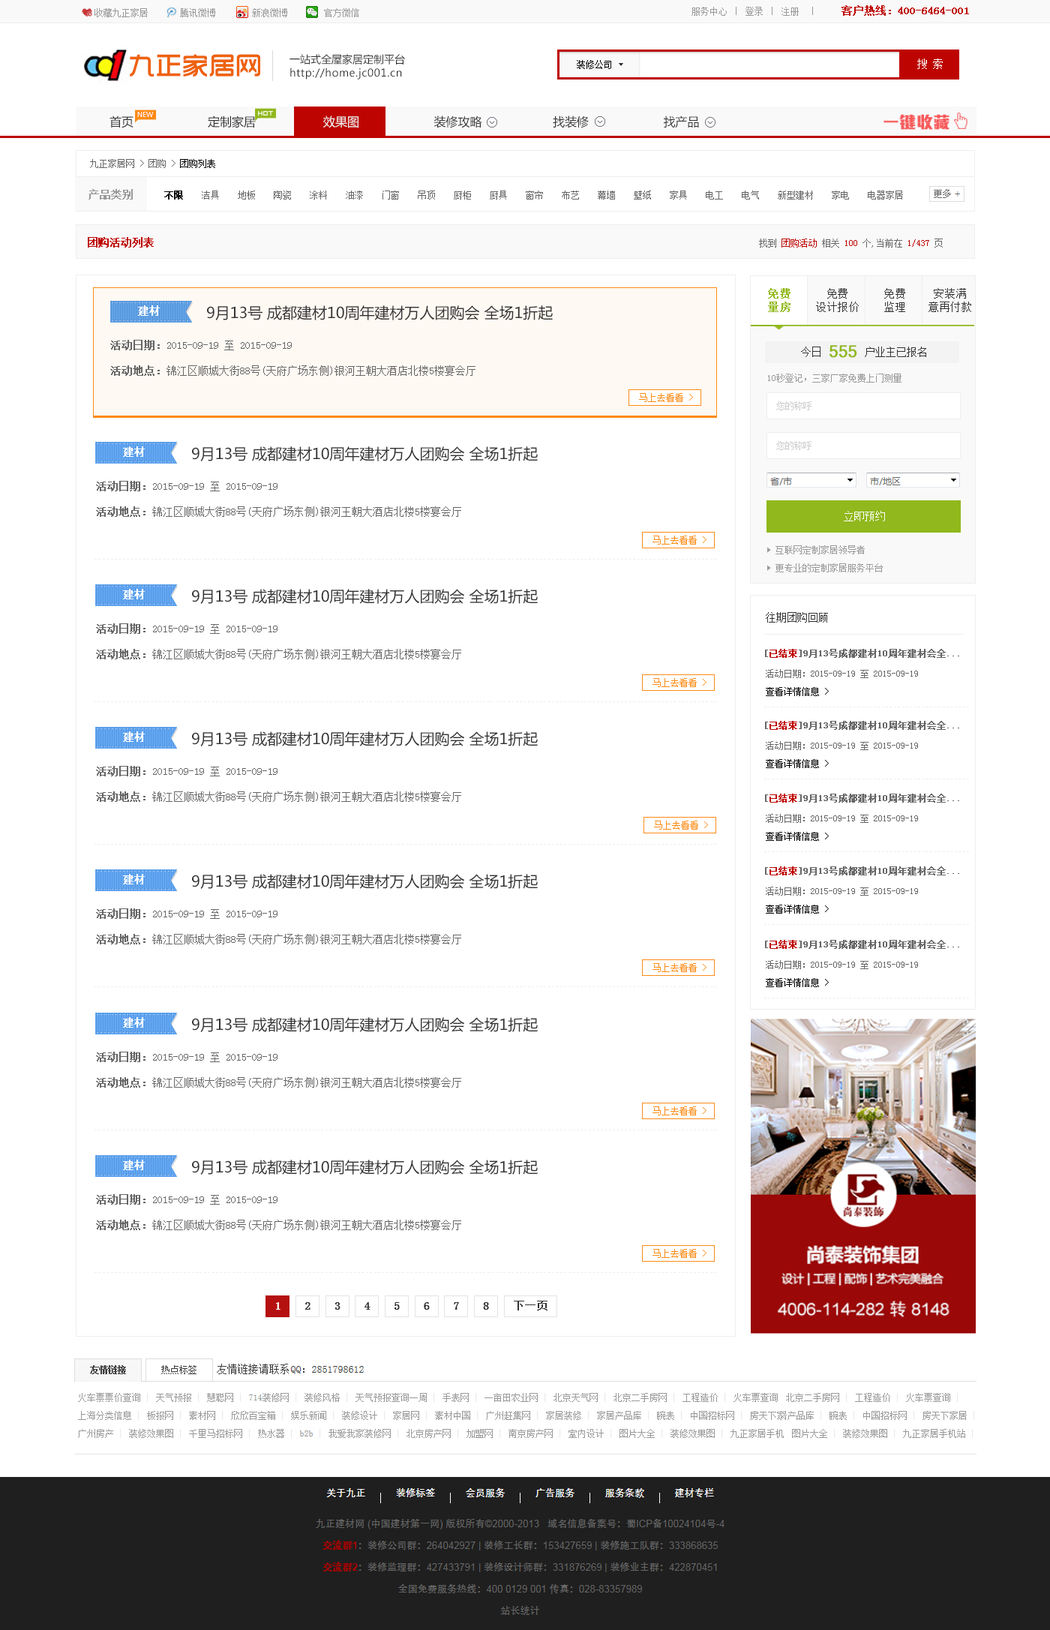
<style>
.page{position:relative;width:1050px;height:1630px;background:#ffffff}
.page>*{position:absolute;margin:0}
.t1{font:9px "NSimSun";color:#999999}
.t2{font:10.5px "NSimSun";color:#bd0400;font-weight:bold}
.t3{font:26px "TRENDS";color:#ee620d;font-weight:bold}
.t4{font:10.5px "MicrosoftYaHei";color:#333333}
.t5{font:9px "NSimSun";color:#000000}
.t6{font:10.5px "MicrosoftYaHei";letter-spacing:0.04em;color:#333333}
.t7{font:6.8px "MicrosoftYaHei";color:#ffffff}
.t8{font:12px "MicrosoftYaHei";color:#333333}
.t9{font:12px "MicrosoftYaHei";color:#efefef}
.t10{font:9px "NSimSun";color:#666666}
.t11{font:10.5px "NSimSun";color:#999999;font-weight:bold}
.t12{font:9px "NSimSun";color:#000000;font-weight:bold}
.t13{font:9px "NSimSun";color:#bd0400}
.t14{font:10.5px/13.5px "NSimSun";letter-spacing:0.05em;color:#91b81d;font-weight:bold}
.t15{font:10.5px/13.5px "NSimSun";letter-spacing:0.05em;color:#333333}
.t16{font:10.5px "NSimSun";color:#ffffff;font-weight:bold}
.t17{font:15px "MicrosoftYaHei";color:#333333}
.t18{font:10.5px/25.5px "NSimSun";color:#666666}
.t19{font:10.5px/25.5px "NSimSun";color:#666666;font-weight:bold}
.t20{font:10.5px "NSimSun";color:#333333}
.t21{font:15.9px "Kartika";color:#91b81d;font-weight:bold}
.t22{font:9px "NSimSun";color:#fd8a13}
.t23{font:9px "NSimSun";color:#cccccc}
.t24{font:10.5px "NSimSun";color:#ffffff}
.t25{font:9px/18px "NSimSun";color:#999999}
.t26{font:4.5px "NSimSun";letter-spacing:0.4em;color:#eeeeee;font-weight:bold}
.t27{font:9px "NSimSun";color:#666666;font-weight:bold}
.t28{font:9px "NSimSun";color:#bd0400;font-weight:bold}
</style>
<div class="page">
<p class="t1" style="left:692px;top:5px;width:277px;height:11px">服务中心 ｜ 登录 ｜ 注册  ｜     <span class="t2">客户热线：400-6464-001</span></p>
<p class="t1" style="left:94px;top:8px;width:265px;height:9px">收藏九正家居       腾讯微博        新浪微博        官方微信</p>
<p class="t3" style="left:130px;top:54px;width:130px;height:23px">九正家居网</p>
<p class="t4" style="left:290px;top:54px;width:115px;height:10px">一站式全屋家居定制平台</p>
<p class="t5" style="left:577px;top:60px;width:34px;height:9px">装修公司</p>
<p class="t6" style="left:290px;top:68px;width:112px;height:12px">http://home.jc001.cn</p>
<p class="t7" style="left:137px;top:112px;width:17px;height:5px">NEW</p>
<p class="t8" style="left:110px;top:116px;width:24px;height:12px">首页</p>
<p class="t8" style="left:208px;top:116px;width:491px;height:12px">定制家居                  <span class="t9"> 效果图</span>                     装修攻略                    找装修                     找产品</p>
<p class="t10" style="left:90px;top:159px;width:125px;height:9px">九正家居网 &gt; 团购 &gt; <span class="t5">团购列表</span></p>
<p class="t11" style="left:88px;top:189px;width:45px;height:11px">产品类别</p>
<p class="t10" style="left:164px;top:190px;width:739px;height:10px"><span class="t12">不限</span>    洁具    地板    陶瓷    涂料    油漆    门窗    吊顶    厨柜    厨具    窗帘    布艺    幕墙    壁纸    家具    电工    电气    新型建材    家电    电器家居</p>
<p class="t2" style="left:88px;top:237px;width:66px;height:11px">团购活动列表</p>
<p class="t10" style="left:759px;top:238px;width:184px;height:10px">找到 <span class="t13">团购活动</span> 相关 <span class="t13">100</span> 个,当前在 <span class="t13">1/437</span> 页</p>
<p class="t14" style="left:768px;top:288px;width:22px;height:24px">免费<br>量房</p>
<p class="t15" style="left:816px;top:288px;width:43px;height:24px;text-align:center">免费<br>设计报价</p>
<p class="t15" style="left:884px;top:288px;width:21px;height:24px">免费<br>监理</p>
<p class="t15" style="left:928px;top:288px;width:43px;height:24px;text-align:center">安装满<br>意再付款</p>
<p class="t16" style="left:138px;top:305px;width:22px;height:11px">建材</p>
<p class="t17" style="left:207px;top:305px;width:346px;height:15px">9月13号 成都建材10周年建材万人团购会 全场1折起</p>
<p class="t18" style="left:110px;top:340px;width:366px;height:36px"><span class="t19">活动日期：</span>2015-09-19 至 2015-09-19<br><span class="t19">活动地点：</span>锦江区顺城大街88号(天府广场东侧)银河王朝大酒店北楼5楼宴会厅</p>
<p class="t20" style="left:801px;top:346px;width:125px;height:11px">今日       户业主已报名</p>
<p class="t21" style="left:830px;top:345px;width:27px;height:13px">555</p>
<p class="t1" style="left:768px;top:374px;width:134px;height:8px">10秒登记，三家厂家免费上门测量</p>
<p class="t22" style="left:639px;top:393px;width:54px;height:9px">马上去看看 &gt;</p>
<p class="t23" style="left:776px;top:401px;width:36px;height:9px">您的称呼</p>
<p class="t16" style="left:123px;top:446px;width:22px;height:11px">建材</p>
<p class="t17" style="left:192px;top:446px;width:346px;height:15px">9月13号 成都建材10周年建材万人团购会 全场1折起</p>
<p class="t23" style="left:776px;top:441px;width:36px;height:9px">您的称呼</p>
<p class="t18" style="left:96px;top:481px;width:365px;height:36px"><span class="t19">活动日期：</span>2015-09-19 至 2015-09-19<br><span class="t19">活动地点：</span>锦江区顺城大街88号(天府广场东侧)银河王朝大酒店北楼5楼宴会厅</p>
<p class="t24" style="left:844px;top:511px;width:41px;height:10px">立即预约</p>
<p class="t22" style="left:652px;top:536px;width:54px;height:8px">马上去看看 &gt;</p>
<p class="t25" style="left:776px;top:545px;width:107px;height:27px">互联网定制家居领导者<br>更专业的定制家居服务平台</p>
<p class="t26" style="left:94px;top:559px;width:622px;height:1px">----------------------------------------------------------------------------------------------------------------------------------------------------------</p>
<p class="t16" style="left:123px;top:589px;width:22px;height:10px">建材</p>
<p class="t17" style="left:192px;top:589px;width:346px;height:15px">9月13号 成都建材10周年建材万人团购会 全场1折起</p>
<p class="t20" style="left:766px;top:612px;width:62px;height:10px">往期团购回顾</p>
<p class="t18" style="left:96px;top:623px;width:365px;height:36px"><span class="t19">活动日期：</span>2015-09-19 至 2015-09-19<br><span class="t19">活动地点：</span>锦江区顺城大街88号(天府广场东侧)银河王朝大酒店北楼5楼宴会厅</p>
<p class="t27" style="left:765px;top:649px;width:194px;height:9px">[<span class="t28">已结束</span>]9月13号成都建材10周年建材会全...</p>
<p class="t22" style="left:652px;top:678px;width:54px;height:9px">马上去看看 &gt;</p>
<p class="t10" style="left:766px;top:669px;width:152px;height:9px">活动日期：2015-09-19 至 2015-09-19</p>
<p class="t5" style="left:766px;top:687px;width:63px;height:9px">查看详情信息 &gt;</p>
<p class="t26" style="left:94px;top:701px;width:622px;height:1px">----------------------------------------------------------------------------------------------------------------------------------------------------------</p>
<p class="t26" style="left:764px;top:706px;width:205px;height:1px">---------------------------------------------------</p>
<p class="t27" style="left:765px;top:721px;width:194px;height:9px">[<span class="t28">已结束</span>]9月13号成都建材10周年建材会全...</p>
<p class="t16" style="left:123px;top:731px;width:22px;height:11px">建材</p>
<p class="t17" style="left:192px;top:731px;width:346px;height:15px">9月13号 成都建材10周年建材万人团购会 全场1折起</p>
<p class="t10" style="left:766px;top:741px;width:152px;height:9px">活动日期：2015-09-19 至 2015-09-19</p>
<p class="t5" style="left:766px;top:759px;width:63px;height:9px">查看详情信息 &gt;</p>
<p class="t18" style="left:96px;top:766px;width:365px;height:36px"><span class="t19">活动日期：</span>2015-09-19 至 2015-09-19<br><span class="t19">活动地点：</span>锦江区顺城大街88号(天府广场东侧)银河王朝大酒店北楼5楼宴会厅</p>
<p class="t26" style="left:764px;top:778px;width:205px;height:1px">---------------------------------------------------</p>
<p class="t27" style="left:765px;top:794px;width:194px;height:8px">[<span class="t28">已结束</span>]9月13号成都建材10周年建材会全...</p>
<p class="t22" style="left:654px;top:820px;width:54px;height:10px">马上去看看 &gt;</p>
<p class="t10" style="left:766px;top:814px;width:152px;height:9px">活动日期：2015-09-19 至 2015-09-19</p>
<p class="t5" style="left:766px;top:832px;width:63px;height:9px">查看详情信息 &gt;</p>
<p class="t26" style="left:94px;top:844px;width:622px;height:0px">----------------------------------------------------------------------------------------------------------------------------------------------------------</p>
<p class="t26" style="left:764px;top:851px;width:205px;height:1px">---------------------------------------------------</p>
<p class="t27" style="left:765px;top:866px;width:194px;height:9px">[<span class="t28">已结束</span>]9月13号成都建材10周年建材会全...</p>
<p class="t16" style="left:123px;top:874px;width:22px;height:10px">建材</p>
<p class="t17" style="left:192px;top:874px;width:346px;height:15px">9月13号 成都建材10周年建材万人团购会 全场1折起</p>
<p class="t10" style="left:766px;top:886px;width:152px;height:10px">活动日期：2015-09-19 至 2015-09-19</p>
<p class="t5" style="left:766px;top:904px;width:63px;height:10px">查看详情信息 &gt;</p>
<p class="t18" style="left:96px;top:908px;width:365px;height:36px"><span class="t19">活动日期：</span>2015-09-19 至 2015-09-19<br><span class="t19">活动地点：</span>锦江区顺城大街88号(天府广场东侧)银河王朝大酒店北楼5楼宴会厅</p>
<p class="t26" style="left:764px;top:924px;width:205px;height:1px">---------------------------------------------------</p>
<p class="t27" style="left:765px;top:940px;width:194px;height:9px">[<span class="t28">已结束</span>]9月13号成都建材10周年建材会全...</p>
<p class="t22" style="left:652px;top:963px;width:54px;height:9px">马上去看看 &gt;</p>
<p class="t10" style="left:766px;top:960px;width:152px;height:9px">活动日期：2015-09-19 至 2015-09-19</p>
<p class="t26" style="left:94px;top:986px;width:622px;height:1px">----------------------------------------------------------------------------------------------------------------------------------------------------------</p>
<p class="t5" style="left:766px;top:978px;width:63px;height:9px">查看详情信息 &gt;</p>
<p class="t26" style="left:764px;top:998px;width:205px;height:0px">---------------------------------------------------</p>
<p class="t16" style="left:123px;top:1017px;width:22px;height:11px">建材</p>
<p class="t17" style="left:192px;top:1017px;width:346px;height:15px">9月13号 成都建材10周年建材万人团购会 全场1折起</p>
<p class="t18" style="left:96px;top:1052px;width:365px;height:36px"><span class="t19">活动日期：</span>2015-09-19 至 2015-09-19<br><span class="t19">活动地点：</span>锦江区顺城大街88号(天府广场东侧)银河王朝大酒店北楼5楼宴会厅</p>
<p class="t22" style="left:652px;top:1106px;width:54px;height:9px">马上去看看 &gt;</p>
<p class="t26" style="left:94px;top:1130px;width:622px;height:0px">----------------------------------------------------------------------------------------------------------------------------------------------------------</p>
<p class="t16" style="left:123px;top:1160px;width:22px;height:10px">建材</p>
<p class="t17" style="left:192px;top:1160px;width:346px;height:14px">9月13号 成都建材10周年建材万人团购会 全场1折起</p>
<p class="t18" style="left:96px;top:1194px;width:365px;height:36px"><span class="t19">活动日期：</span>2015-09-19 至 2015-09-19<br><span class="t19">活动地点：</span>锦江区顺城大街88号(天府广场东侧)银河王朝大酒店北楼5楼宴会厅</p>
<p class="t22" style="left:652px;top:1249px;width:54px;height:9px">马上去看看 &gt;</p>
<p class="t26" style="left:94px;top:1272px;width:622px;height:1px">----------------------------------------------------------------------------------------------------------------------------------------------------------</p>
</div>
